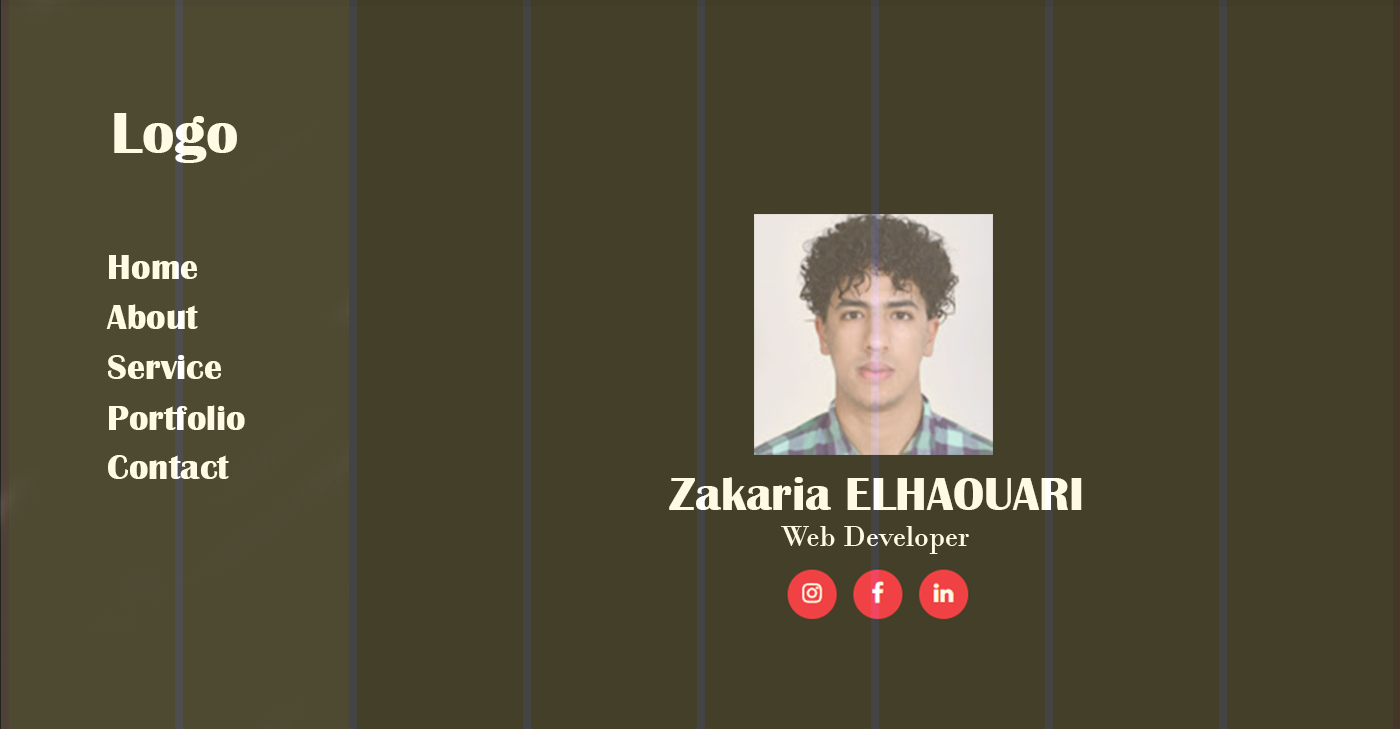
<style>
.page{position:relative;width:1400px;height:729px;background:#443f28}
.page>*{position:absolute;margin:0}
.t1{font:60px "BritannicBold";color:#fffae3}
.t2{font:36px "BritannicBold";color:#fffae3}
.t3{font:48px "BritannicBold";color:#fffae3}
.t4{font:30px "BodoniMT";color:#fffae3}
</style>
<div class="page">
<p class="t1" style="left:114px;top:113px;width:123px;height:50px">Logo</p>
<p class="t2" style="left:109px;top:255px;width:88px;height:24px">Home</p>
<p class="t2" style="left:106px;top:304px;width:92px;height:25px">About</p>
<p class="t2" style="left:108px;top:355px;width:113px;height:24px">Service</p>
<p class="t2" style="left:109px;top:405px;width:136px;height:25px">Portfolio</p>
<p class="t2" style="left:108px;top:455px;width:121px;height:24px">Contact</p>
<p class="t3" style="left:669px;top:477px;width:413px;height:33px">Zakaria ELHAOUARI</p>
<p class="t4" style="left:781px;top:526px;width:188px;height:28px">Web Developer</p>
</div>
